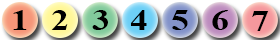
<style>
.page{position:relative;width:280px;height:40px}
.page>*{position:absolute;margin:0}
.t1{font:29.9px "TimesNewRomanPS-BoldMT";color:#000000;scale:1.2 1}
</style>
<div class="page">
<p class="t1" style="left:13px;top:10px;width:14px;height:20px">1</p>
<p class="t1" style="left:51px;top:10px;width:17px;height:20px">2</p>
<p class="t1" style="left:92px;top:10px;width:16px;height:20px">3</p>
<p class="t1" style="left:131px;top:10px;width:16px;height:20px">4</p>
<p class="t1" style="left:172px;top:10px;width:16px;height:20px">5</p>
<p class="t1" style="left:212px;top:10px;width:16px;height:20px">6</p>
<p class="t1" style="left:252px;top:11px;width:17px;height:20px">7</p>
</div>
